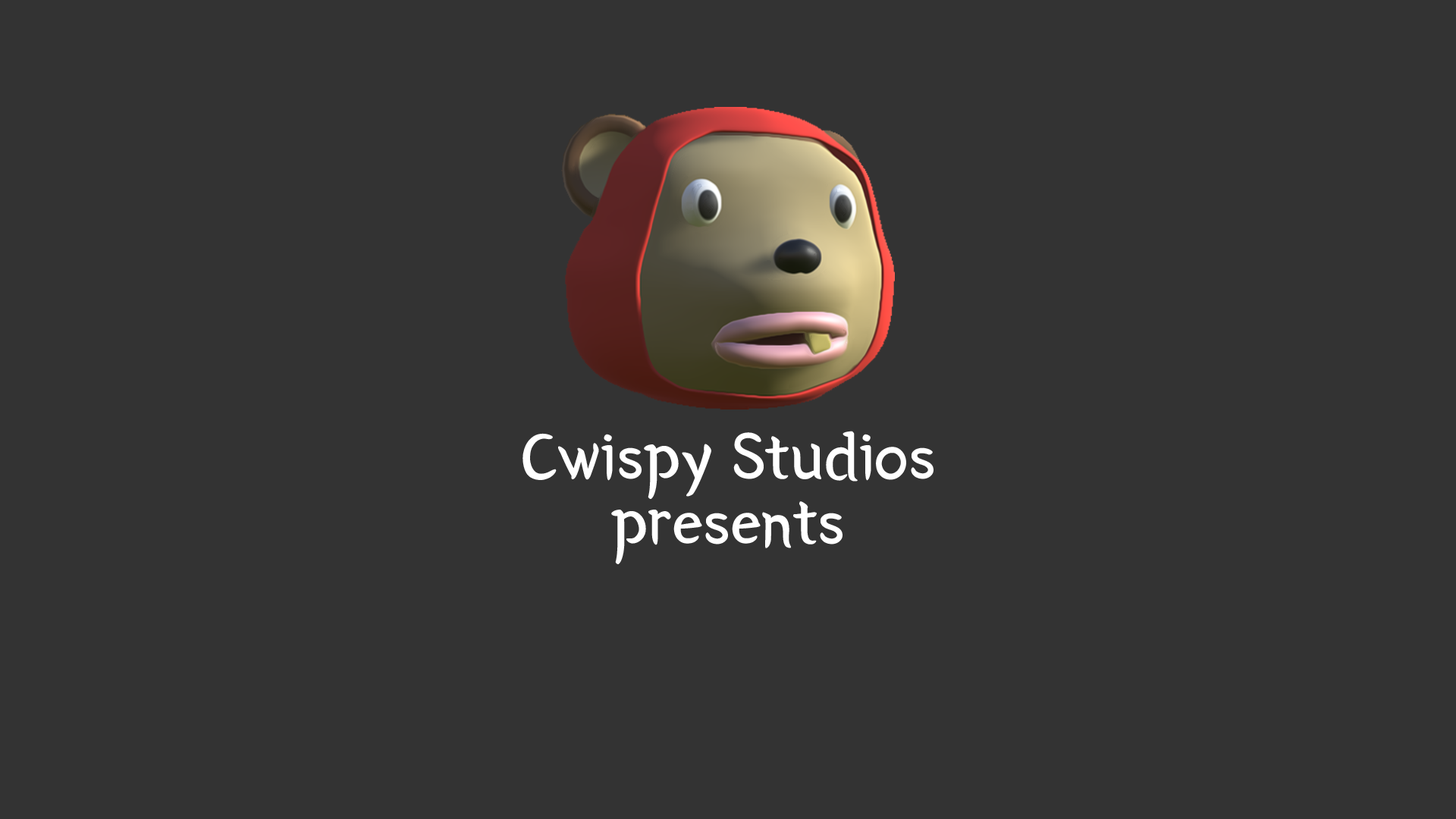
<style>
.page{position:relative;width:1456px;height:819px;background:#333333}
.page>*{position:absolute;margin:0}
.t1{font:69.1px/65.2px "BMYEONSUNG";color:#ffffff}
</style>
<div class="page">
<p class="t1" style="left:522px;top:431px;width:411px;height:133px;text-align:center">Cwispy Studios<br>presents</p>
</div>
